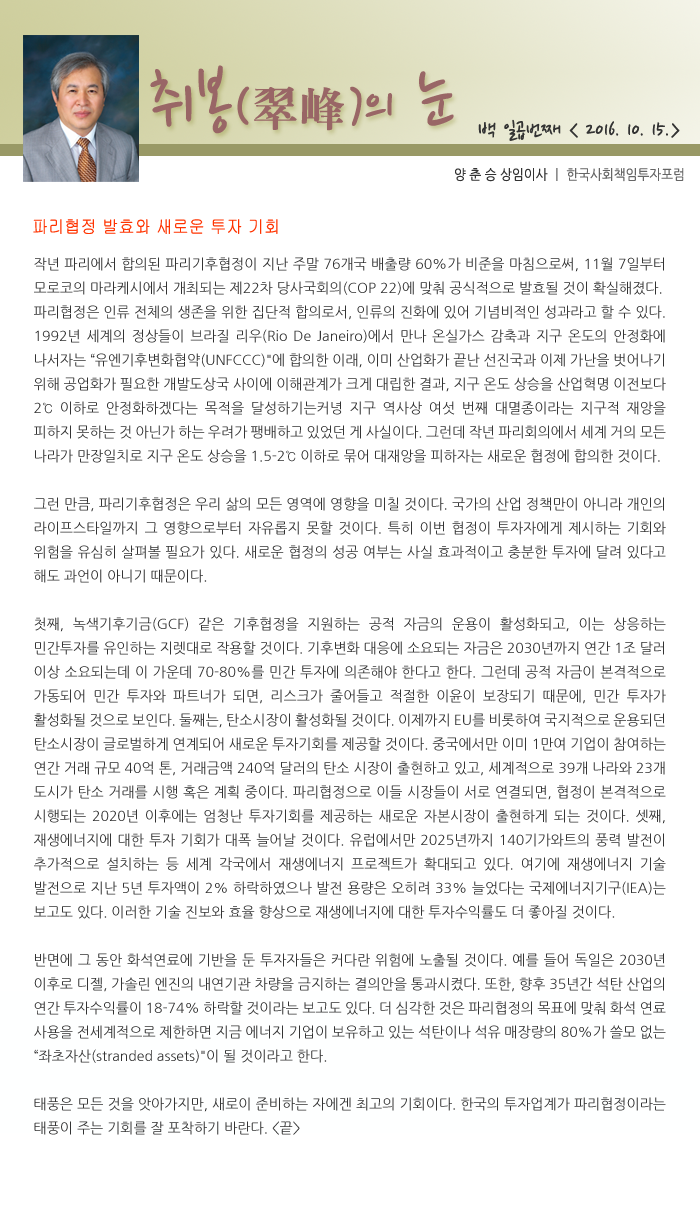
<style>
.page{position:relative;width:700px;height:1219px;background:#ffffff}
.page>*{position:absolute;margin:0}
.t1{font:77.5px "NanumPen";color:#996666}
.t2{font:60px "NanumPen";color:#996666}
.t3{font:48px "H2mjrE";color:#996666}
.t4{font:24px "NanumPen";color:#333333}
.t5{font:14px "NanumGothic";color:#666666;scale:0.9 1}
.t6{font:14px "NanumGothic";color:#333333;scale:0.9 1}
.t7{font:18px "Gulim";color:#ff3300;scale:0.9 1}
.t8{font:14px/24px "NanumGothic";color:#333333}
</style>
<div class="page">
<p class="t1" style="left:150px;top:65px;width:304px;height:69px">취봉<span class="t2">(</span><span class="t3">翠峰</span><span class="t2">)</span><span class="t2">의</span> 눈</p>
<p class="t4" style="left:478px;top:119px;width:202px;height:22px">백 일곱번째 &lt; 2016. 10. 15.&gt;</p>
<p class="t5" style="left:455px;top:168px;width:229px;height:14px"><span class="t6">양 춘 승 상임이사 </span>ㅣ 한국사회책임투자포럼</p>
<p class="t7" style="left:33px;top:219px;width:245px;height:15px">파리협정 발효와 새로운 투자 기회</p>
<p class="t8" style="left:34px;top:257px;width:632px;height:878px;text-align:justify">작년 파리에서 합의된 파리기후협정이 지난 주말 76개국 배출량 60%가 비준을 마침으로써, 11월 7일부터 모로코의 마라케시에서 개최되는 제22차 당사국회의(COP 22)에 맞춰 공식적으로 발효될 것이 확실해졌다.<br>파리협정은 인류 전체의 생존을 위한 집단적 합의로서, 인류의 진화에 있어 기념비적인 성과라고 할 수 있다. 1992년 세계의 정상들이 브라질 리우(Rio De Janeiro)에서 만나 온실가스 감축과 지구 온도의 안정화에 나서자는 “유엔기후변화협약(UNFCCC)"에 합의한 이래, 이미 산업화가 끝난 선진국과 이제 가난을 벗어나기 위해 공업화가 필요한 개발도상국 사이에 이해관계가 크게 대립한 결과, 지구 온도 상승을 산업혁명 이전보다 2℃ 이하로 안정화하겠다는 목적을 달성하기는커녕 지구 역사상 여섯 번째 대멸종이라는 지구적 재앙을 피하지 못하는 것 아닌가 하는 우려가 팽배하고 있었던 게 사실이다. 그런데 작년 파리회의에서 세계 거의 모든 나라가 만장일치로 지구 온도 상승을 1.5-2℃ 이하로 묶어 대재앙을 피하자는 새로운 협정에 합의한 것이다. <br><br>그런 만큼, 파리기후협정은 우리 삶의 모든 영역에 영향을 미칠 것이다. 국가의 산업 정책만이 아니라 개인의 라이프스타일까지 그 영향으로부터 자유롭지 못할 것이다. 특히 이번 협정이 투자자에게 제시하는 기회와 위험을 유심히 살펴볼 필요가 있다. 새로운 협정의 성공 여부는 사실 효과적이고 충분한 투자에 달려 있다고 해도 과언이 아니기 때문이다. <br><br>첫째, 녹색기후기금(GCF) 같은 기후협정을 지원하는 공적 자금의 운용이 활성화되고, 이는 상응하는 민간투자를 유인하는 지렛대로 작용할 것이다. 기후변화 대응에 소요되는 자금은 2030년까지 연간 1조 달러 이상 소요되는데 이 가운데 70-80%를 민간 투자에 의존해야 한다고 한다. 그런데 공적 자금이 본격적으로 가동되어 민간 투자와 파트너가 되면, 리스크가 줄어들고 적절한 이윤이 보장되기 때문에, 민간 투자가 활성화될 것으로 보인다. 둘째는, 탄소시장이 활성화될 것이다. 이제까지 EU를 비롯하여 국지적으로 운용되던 탄소시장이 글로벌하게 연계되어 새로운 투자기회를 제공할 것이다. 중국에서만 이미 1만여 기업이 참여하는 연간 거래 규모 40억 톤, 거래금액 240억 달러의 탄소 시장이 출현하고 있고, 세계적으로 39개 나라와 23개 도시가 탄소 거래를 시행 혹은 계획 중이다. 파리협정으로 이들 시장들이 서로 연결되면, 협정이 본격적으로 시행되는 2020년 이후에는 엄청난 투자기회를 제공하는 새로운 자본시장이 출현하게 되는 것이다. 셋째, 재생에너지에 대한 투자 기회가 대폭 늘어날 것이다. 유럽에서만 2025년까지 140기가와트의 풍력 발전이 추가적으로 설치하는 등 세계 각국에서 재생에너지 프로젝트가 확대되고 있다. 여기에 재생에너지 기술 발전으로 지난 5년 투자액이 2% 하락하였으나 발전 용량은 오히려 33% 늘었다는 국제에너지기구(IEA)는 보고도 있다. 이러한 기술 진보와 효율 향상으로 재생에너지에 대한 투자수익률도 더 좋아질 것이다.<br><br>반면에 그 동안 화석연료에 기반을 둔 투자자들은 커다란 위험에 노출될 것이다. 예를 들어 독일은 2030년 이후로 디젤, 가솔린 엔진의 내연기관 차량을 금지하는 결의안을 통과시켰다. 또한, 향후 35년간 석탄 산업의 연간 투자수익률이 18-74% 하락할 것이라는 보고도 있다. 더 심각한 것은 파리협정의 목표에 맞춰 화석 연료 사용을 전세계적으로 제한하면 지금 에너지 기업이 보유하고 있는 석탄이나 석유 매장량의 80%가 쓸모 없는 “좌초자산(stranded assets)"이 될 것이라고 한다. <br><br>태풍은 모든 것을 앗아가지만, 새로이 준비하는 자에겐 최고의 기회이다. 한국의 투자업계가 파리협정이라는 태풍이 주는 기회를 잘 포착하기 바란다. &lt;끝&gt;</p>
</div>
